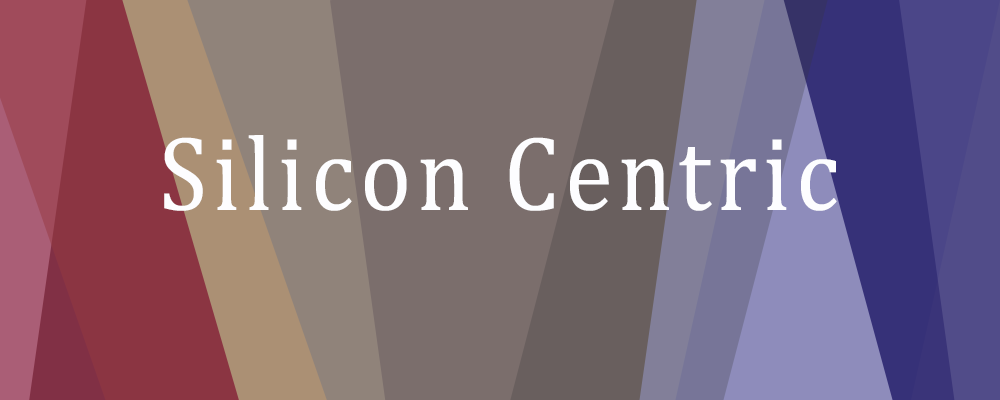
<style>
.page{position:relative;width:1000px;height:400px}
.page>*{position:absolute;margin:0}
.t1{font:107.2px "Cambria";letter-spacing:0.06em;color:#fefeff;scale:0.91 1}
</style>
<div class="page">
<p class="t1" style="left:164px;top:135px;width:673px;height:76px">Silicon Centric</p>
</div>
